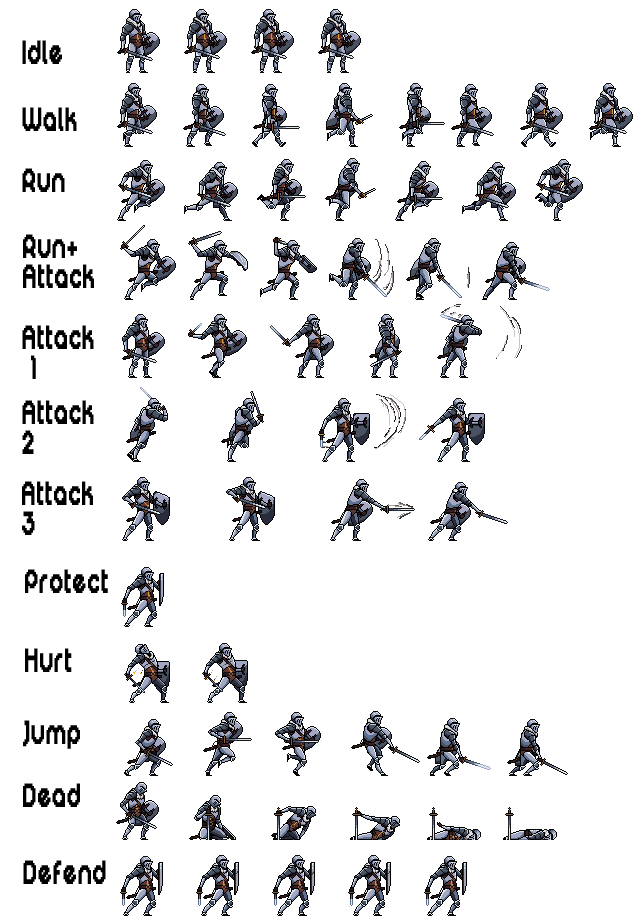
<style>
.page{position:relative;width:640px;height:920px;background:#ffffff}
.page>*{position:absolute;margin:0}
.t1{font:37.5px "DigitalDisco";letter-spacing:0.03em;color:#000000;scale:0.67 1}
</style>
<div class="page">
<p class="t1" style="left:22px;top:40px;width:40px;height:24px">Idle</p>
<p class="t1" style="left:22px;top:107px;width:55px;height:24px">Walk</p>
<p class="t1" style="left:22px;top:168px;width:43px;height:24px">Run</p>
<p class="t1" style="left:23px;top:234px;width:71px;height:54px">Run+ Attack</p>
<p class="t1" style="left:22px;top:325px;width:72px;height:54px">Attack<br> 1</p>
<p class="t1" style="left:22px;top:400px;width:72px;height:54px">Attack 2<br><br> 2 3</p>
<p class="t1" style="left:22px;top:481px;width:71px;height:54px">Attack 3</p>
<p class="t1" style="left:25px;top:569px;width:83px;height:24px">Protect</p>
<p class="t1" style="left:25px;top:648px;width:47px;height:24px">Hurt</p>
<p class="t1" style="left:23px;top:720px;width:57px;height:29px">Jump</p>
<p class="t1" style="left:23px;top:783px;width:57px;height:24px">Dead</p>
<p class="t1" style="left:23px;top:860px;width:83px;height:24px">Defend</p>
</div>
